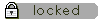
<style>
.page{position:relative;width:101px;height:22px;background:#aaaaaa}
.page>*{position:absolute;margin:0}
.t1{font:13px "CenturyGothic";letter-spacing:0.05em;color:#2e3313}
</style>
<div class="page">
<p class="t1" style="left:34px;top:5px;width:45px;height:10px">locked</p>
</div>
